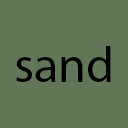
<style>
.page{position:relative;width:128px;height:128px;background:#627658}
.page>*{position:absolute;margin:0}
.t1{font:50px "MyriadPro-Regular";color:#000000}
</style>
<div class="page">
<p class="t1" style="left:16px;top:46px;width:95px;height:36px">sand</p>
</div>
